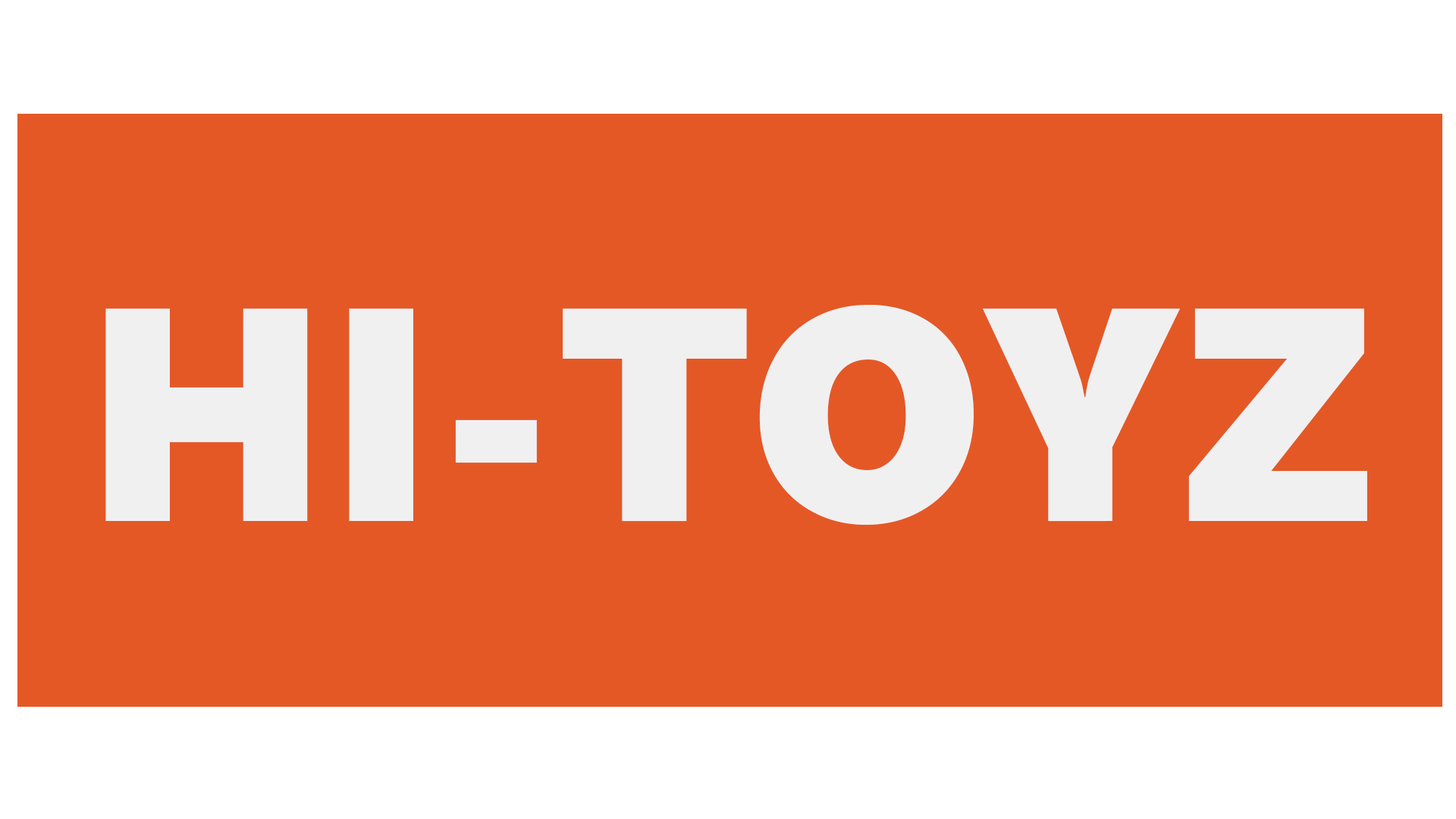
<style>
.page{position:relative;width:1456px;height:819px;background:#e45826}
.page>*{position:absolute;margin:0}
.t1{font:303.3px "SegoeUIBlack";color:#f0f0f0}
</style>
<div class="page">
<p class="t1" style="left:105px;top:304px;width:1262px;height:221px">HI-TOYZ</p>
</div>
